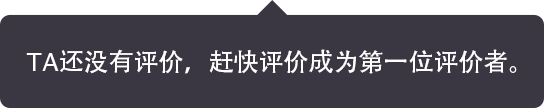
<style>
.page{position:relative;width:544px;height:108px;background:#3b3742}
.page>*{position:absolute;margin:0}
.t1{font:25px "AdobeHeitiStd-Regular";color:#ffffff}
.t2{font:25px "Helvetica";color:#ffffff}
</style>
<div class="page">
<p class="t1" style="left:26px;top:49px;width:491px;height:25px"><span class="t2">TA</span>还没有评价，赶快评价成为第一位评价者。</p>
</div>
